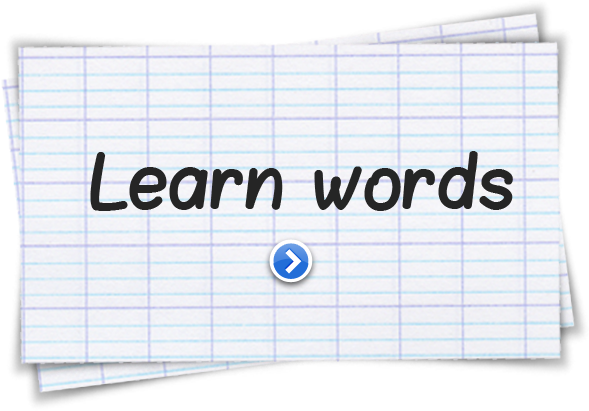
<style>
.page{position:relative;width:589px;height:411px}
.page>*{position:absolute;margin:0}
.t1{font:58.6px "Blokletters-Viltstift";color:#252525}
</style>
<div class="page">
<p class="t1" style="left:90px;top:151px;width:423px;height:60px">Learn words</p>
</div>
